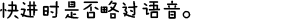
<style>
.page{position:relative;width:294px;height:20px;background:#ffffff}
.page>*{position:absolute;margin:0}
.t1{font:22px "¢è?";color:#000000}
</style>
<div class="page">
<p class="t1" style="left:0px;top:0px;width:191px;height:19px">快进时是否略过语音。</p>
</div>
